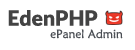
<style>
.page{position:relative;width:135px;height:50px;background:#ffffff}
.page>*{position:absolute;margin:0}
.t1{font:21px "Lato-Black";color:#434343}
.t2{font:12px "MaiandraGD-Regular";color:#4b4f55}
</style>
<div class="page">
<p class="t1" style="left:8px;top:10px;width:90px;height:16px">EdenPHP</p>
<p class="t2" style="left:50px;top:29px;width:73px;height:10px">ePanel Admin</p>
</div>
